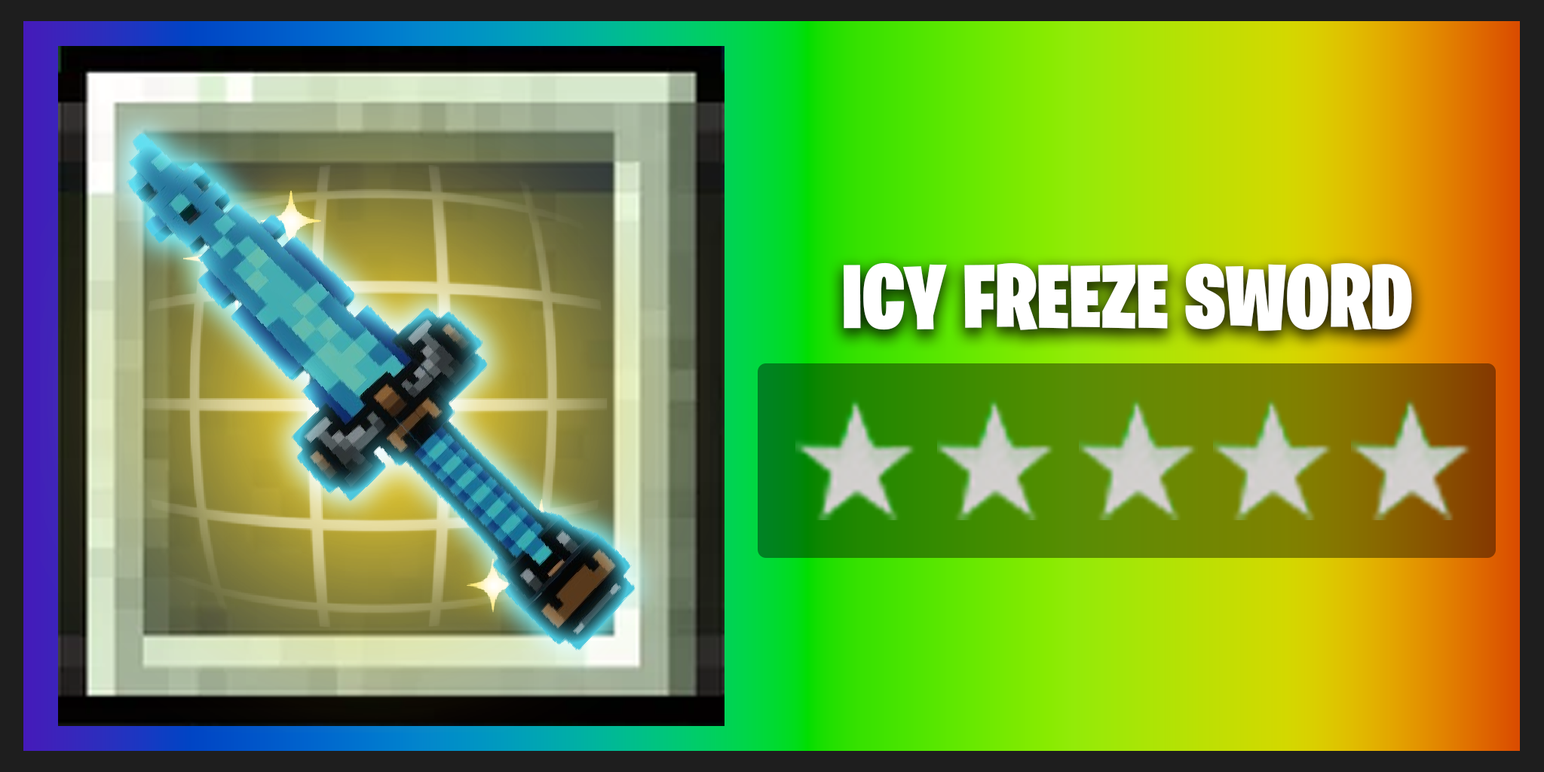
<style>
.page{position:relative;width:1544px;height:772px}
.page>*{position:absolute;margin:0}
.t1{font:90.5px "BurbankBigCondensed-Black";color:#ffffff}
</style>
<div class="page">
<p class="t1" style="left:843px;top:262px;width:569px;height:69px">ICY FREEZE SWORD</p>
</div>
